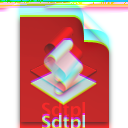
<style>
.page{position:relative;width:128px;height:128px}
.page>*{position:absolute;margin:0}
.t1{font:18px "LucidaGrande-Bold";letter-spacing:-0.02em}
</style>
<div class="page">
<p class="t1" style="left:42px;top:100px;width:43px;height:18px">Sdtpl</p>
</div>
